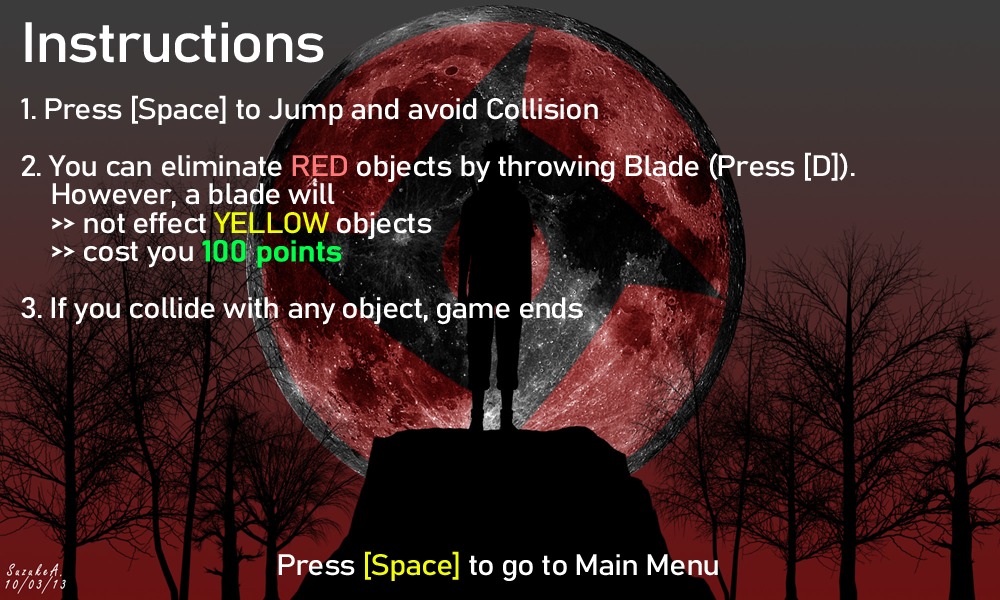
<style>
.page{position:relative;width:1000px;height:600px}
.page>*{position:absolute;margin:0}
.t1{font:29.2px "Bahnschrift";letter-spacing:-0.04em;color:#ffffff;scale:1.11 1}
.t2{font:55.9px "Bahnschrift";letter-spacing:-0.04em;color:#ffffff;scale:1.11 1}
.t3{font:29.2px "Bahnschrift";letter-spacing:-0.04em;color:#ff7878;scale:1.11 1}
.t4{font:29.2px "Bahnschrift";letter-spacing:-0.04em;color:#f0ff00;scale:1.11 1}
.t5{font:29.2px "Bahnschrift";letter-spacing:-0.04em;color:#00ff48;font-weight:bold;scale:1.11 1}
.t6{font:29.2px "Bahnschrift";letter-spacing:-0.04em;color:#f3fc0a;scale:1.11 1}
</style>
<div class="page">
<p class="t1" style="left:21px;top:22px;width:834px;height:303px"><span class="t2">Instructions<br></span><br>1. Press [Space] to Jump and avoid Collision<br><br>2. You can eliminate <span class="t3">RED</span> objects by throwing Blade (Press [D]).<br>    However, a blade will<br>    &gt;&gt; not effect <span class="t4">YELLOW</span> objects<br>    &gt;&gt; cost you <span class="t5">100 points<br></span><br>3. If you collide with any object, game ends</p>
<p class="t1" style="left:278px;top:551px;width:440px;height:30px">Press <span class="t6">[Space]</span> to go to Main Menu</p>
</div>
